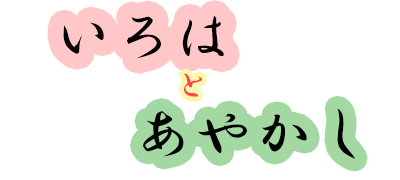
<style>
.page{position:relative;width:400px;height:180px;background:#ffffff}
.page>*{position:absolute;margin:0}
.t1{font:60px "HGSGyoshotai";color:#000000}
.t2{font:36px "HGSGyoshotai";color:#fc4747}
</style>
<div class="page">
<p class="t1" style="left:63px;top:16px;width:161px;height:42px">いろは</p>
<p class="t2" style="left:183px;top:73px;width:19px;height:24px">と</p>
<p class="t1" style="left:143px;top:108px;width:212px;height:51px">あやかし</p>
</div>
